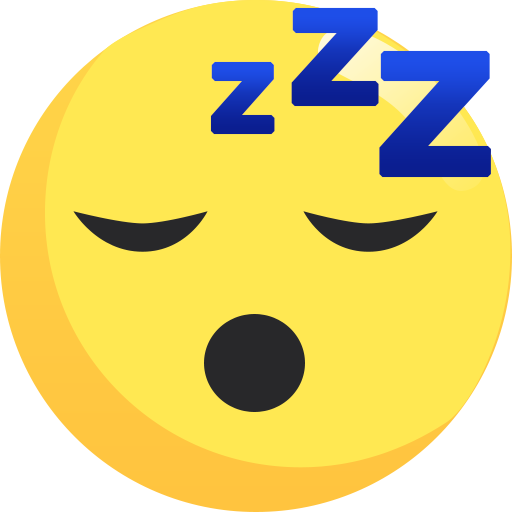
<style>
.page{position:relative;width:512px;height:512px;background:#ffe852}
.page>*{position:absolute;margin:0}
.t1{font:130.5px "AvenirNext-Bold";text-transform:uppercase;font-weight:bold;scale:1.11 1}
.t2{font:170.3px "AvenirNext-Bold";text-transform:uppercase;font-weight:bold;scale:1.11 1}
.t3{font:92.5px "AvenirNext-Bold";text-transform:uppercase;font-weight:bold;scale:1.11 1}
</style>
<div class="page">
<p class="t1" style="left:291px;top:7px;width:88px;height:100px">Z</p>
<p class="t2" style="left:379px;top:50px;width:112px;height:128px">Z</p>
<p class="t3" style="left:210px;top:61px;width:65px;height:74px">Z</p>
</div>
